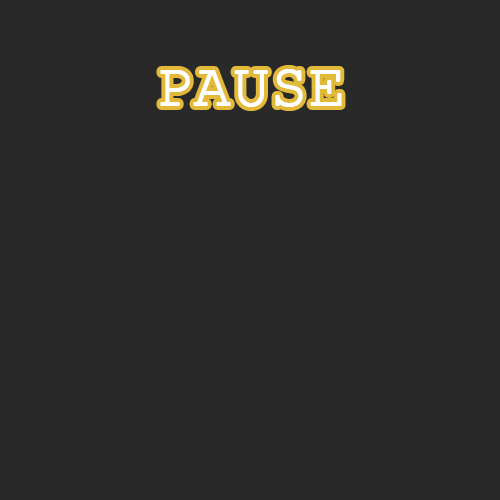
<style>
.page{position:relative;width:500px;height:500px;background:#292929}
.page>*{position:absolute;margin:0}
.t1{font:61.1px "CourierNewPSMT";color:#ffffff;font-weight:bold}
</style>
<div class="page">
<p class="t1" style="left:160px;top:69px;width:182px;height:38px">PAUSE</p>
</div>
